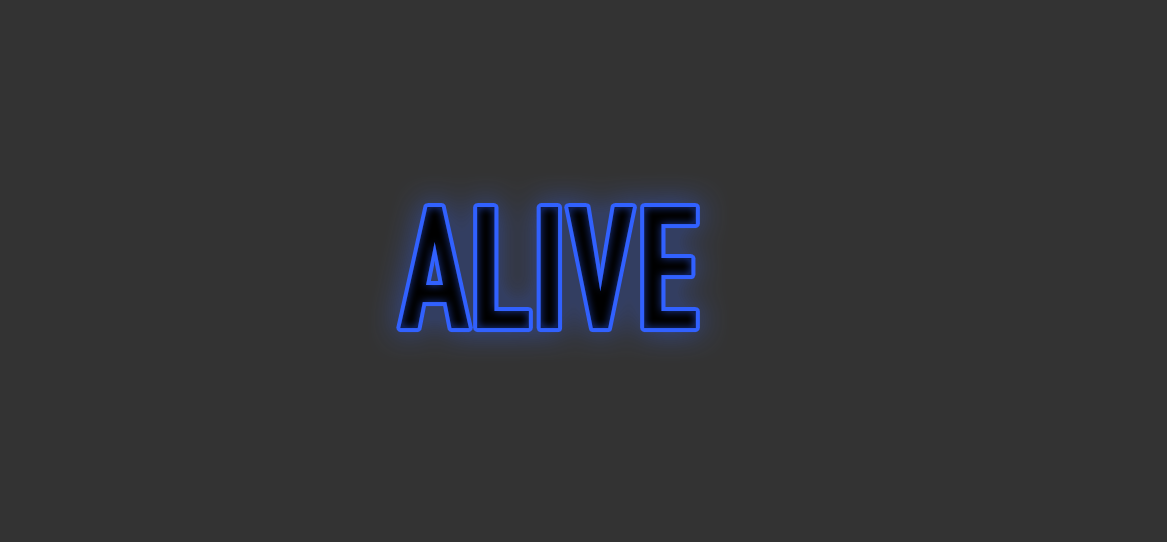
<style>
.page{position:relative;width:1167px;height:542px;background:#333333}
.page>*{position:absolute;margin:0}
.t1{font:170px "DINEngschrift";text-transform:uppercase}
</style>
<div class="page">
<p class="t1" style="left:400px;top:207px;width:296px;height:122px">Alive</p>
</div>
